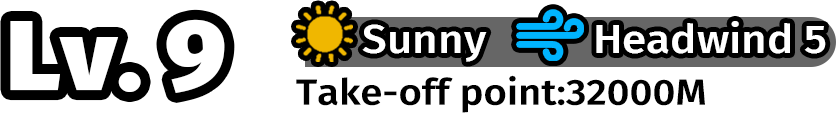
<style>
.page{position:relative;width:836px;height:116px;background:#ffffff}
.page>*{position:absolute;margin:0}
.t1{font:99px "FiraSans-Black";color:#ffffff;scale:1.07 1}
.t2{font:39.6px "FiraSans-Medium";color:#ffffff;scale:1.11 1}
.t3{font:36px "FiraSans-Medium";color:#000000;scale:1.11 1}
</style>
<div class="page">
<p class="t1" style="left:10px;top:19px;width:215px;height:74px">Lv. 9</p>
<p class="t2" style="left:362px;top:24px;width:125px;height:38px">Sunny</p>
<p class="t2" style="left:596px;top:21px;width:230px;height:33px">Headwind 5</p>
<p class="t3" style="left:296px;top:75px;width:409px;height:38px">Take-off point:32000M</p>
</div>
